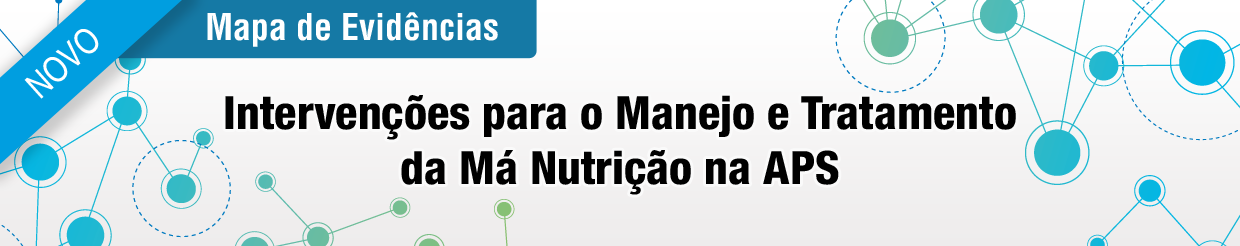
<style>
.page{position:relative;width:1240px;height:246px}
.page>*{position:absolute;margin:0}
.t1{font:36px "Helvetica-CondensedBold";color:#ffffff}
.t2{font:35px "Helvetica-Narrow";color:#ffffff}
.t3{font:46px "Helvetica87-CondensedHeavy";color:#000000}
</style>
<div class="page">
<p class="t1" style="left:207px;top:12px;width:291px;height:35px">Mapa de Evidências</p>
<p class="t2" style="left:24px;top:29px;width:75px;height:70px;rotate:-42deg">NOVO</p>
<p class="t3" style="left:225px;top:95px;width:791px;height:100px;text-align:center">Intervenções para o Manejo e Tratamento<br>da Má Nutrição na APS</p>
</div>
